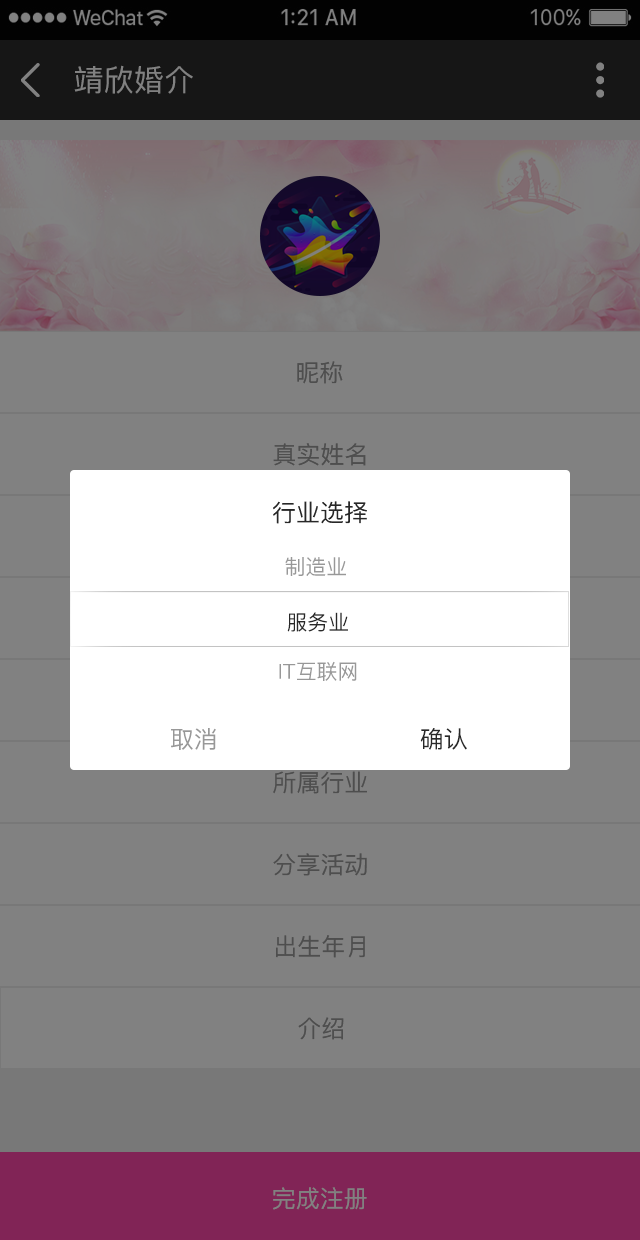
<style>
.page{position:relative;width:640px;height:1240px;background:#818181}
.page>*{position:absolute;margin:0}
.t1{font:30px "PingFang-SC-Medium";letter-spacing:0.01em;color:#818181;text-transform:uppercase}
.t2{font:24px "PingFang-SC-Medium";color:#4e4e4e;text-transform:uppercase}
.t3{font:24px "PingFang-SC-Medium";color:#282828;text-transform:uppercase}
.t4{font:20.8px "PingFang-SC-Medium";color:#989898}
.t5{font:20.8px "PingFang-SC-Medium";color:#282828}
.t6{font:23.8px "PingFang-SC-Medium";color:#989898;text-transform:uppercase}
.t7{font:23.8px "PingFang-SC-Medium";color:#282828;text-transform:uppercase}
.t8{font:24px "PingFang-SC-Medium";color:#818181;text-transform:uppercase}
</style>
<div class="page">
<p class="t1" style="left:74px;top:65px;width:119px;height:29px">靖欣婚介</p>
<p class="t2" style="left:297px;top:361px;width:46px;height:23px">昵称</p>
<p class="t2" style="left:273px;top:443px;width:93px;height:23px">真实姓名</p>
<p class="t3" style="left:273px;top:501px;width:94px;height:23px">行业选择</p>
<p class="t4" style="left:285px;top:557px;width:61px;height:19px">制造业</p>
<p class="t5" style="left:287px;top:612px;width:61px;height:20px">服务业</p>
<p class="t4" style="left:279px;top:661px;width:78px;height:20px">IT互联网</p>
<p class="t6" style="left:171px;top:728px;width:45px;height:22px">取消</p>
<p class="t7" style="left:420px;top:728px;width:47px;height:22px">确认</p>
<p class="t2" style="left:273px;top:771px;width:94px;height:23px">所属行业</p>
<p class="t2" style="left:273px;top:853px;width:94px;height:23px">分享活动</p>
<p class="t2" style="left:276px;top:935px;width:89px;height:23px">出生年月</p>
<p class="t2" style="left:298px;top:1017px;width:46px;height:23px">介绍</p>
<p class="t8" style="left:273px;top:1187px;width:94px;height:23px">完成注册</p>
</div>
